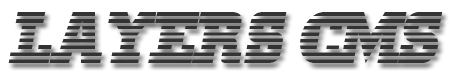
<style>
.page{position:relative;width:454px;height:80px;background:#ffffff}
.page>*{position:absolute;margin:0}
.t1{font:72px "MeninBlue";letter-spacing:-0.025em;color:#333333;font-style:italic}
</style>
<div class="page">
<p class="t1" style="left:8px;top:12px;width:435px;height:51px">layers CMS</p>
</div>
